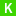
<style>
.page{position:relative;width:16px;height:16px;background:#3dd502}
.page>*{position:absolute;margin:0}
.t1{font:13.2px "DINMittelschrift";letter-spacing:0.06em;color:#ffffff}
</style>
<div class="page">
<p class="t1" style="left:5px;top:3px;width:8px;height:10px">K</p>
</div>
